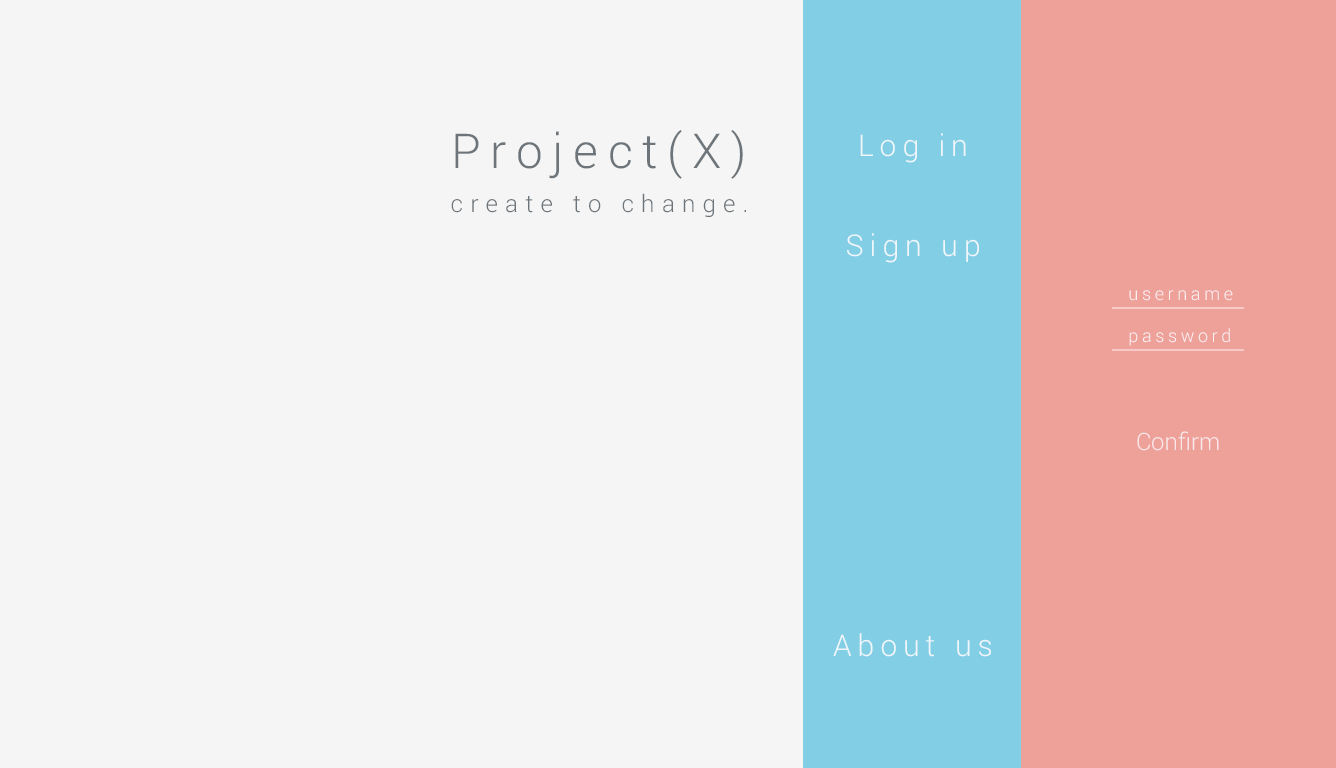
<style>
.page{position:relative;width:1336px;height:768px;background:#f5f5f5}
.page>*{position:absolute;margin:0}
.t1{font:48px "Roboto-Light";letter-spacing:0.2em;color:#6d757a}
.t2{font:30px/100px "Roboto-Light";letter-spacing:0.2em;color:#f0f6fa}
.t3{font:24px "Roboto-Light";letter-spacing:0.3em;color:#6d757a}
.t4{font:18px "Roboto-Light";letter-spacing:0.2em;color:#faf0f5}
.t5{font:24px "Roboto-Light";color:#f9e7ea}
</style>
<div class="page">
<p class="t1" style="left:455px;top:130px;width:288px;height:49px">Project(X)</p>
<p class="t2" style="left:833px;top:133px;width:158px;height:524px;text-align:center">Log in<br>Sign up<br><br><br><br>About us</p>
<p class="t3" style="left:451px;top:193px;width:295px;height:24px">create to change.</p>
<p class="t4" style="left:1129px;top:290px;width:104px;height:11px">username</p>
<p class="t4" style="left:1129px;top:328px;width:101px;height:18px">password</p>
<p class="t5" style="left:1137px;top:431px;width:82px;height:20px">Confirm</p>
</div>
